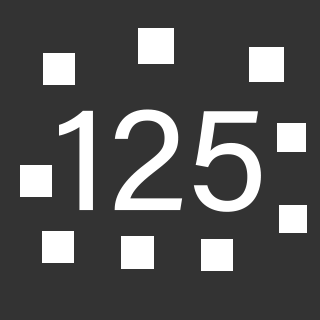
<style>
.page{position:relative;width:320px;height:320px;background:#333333}
.page>*{position:absolute;margin:0}
.t1{font:150px "AcuminConcept-Regular";color:#ffffff}
</style>
<div class="page">
<p class="t1" style="left:59px;top:109px;width:202px;height:103px">125</p>
</div>
